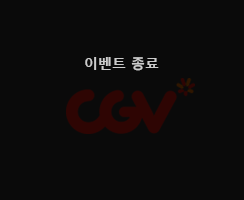
<style>
.page{position:relative;width:244px;height:200px;background:#0a0a0a}
.page>*{position:absolute;margin:0}
.t1{font:14px "MalgunGothicBold";color:#cccccc}
</style>
<div class="page">
<p class="t1" style="left:85px;top:57px;width:74px;height:14px">이벤트 종료</p>
</div>
